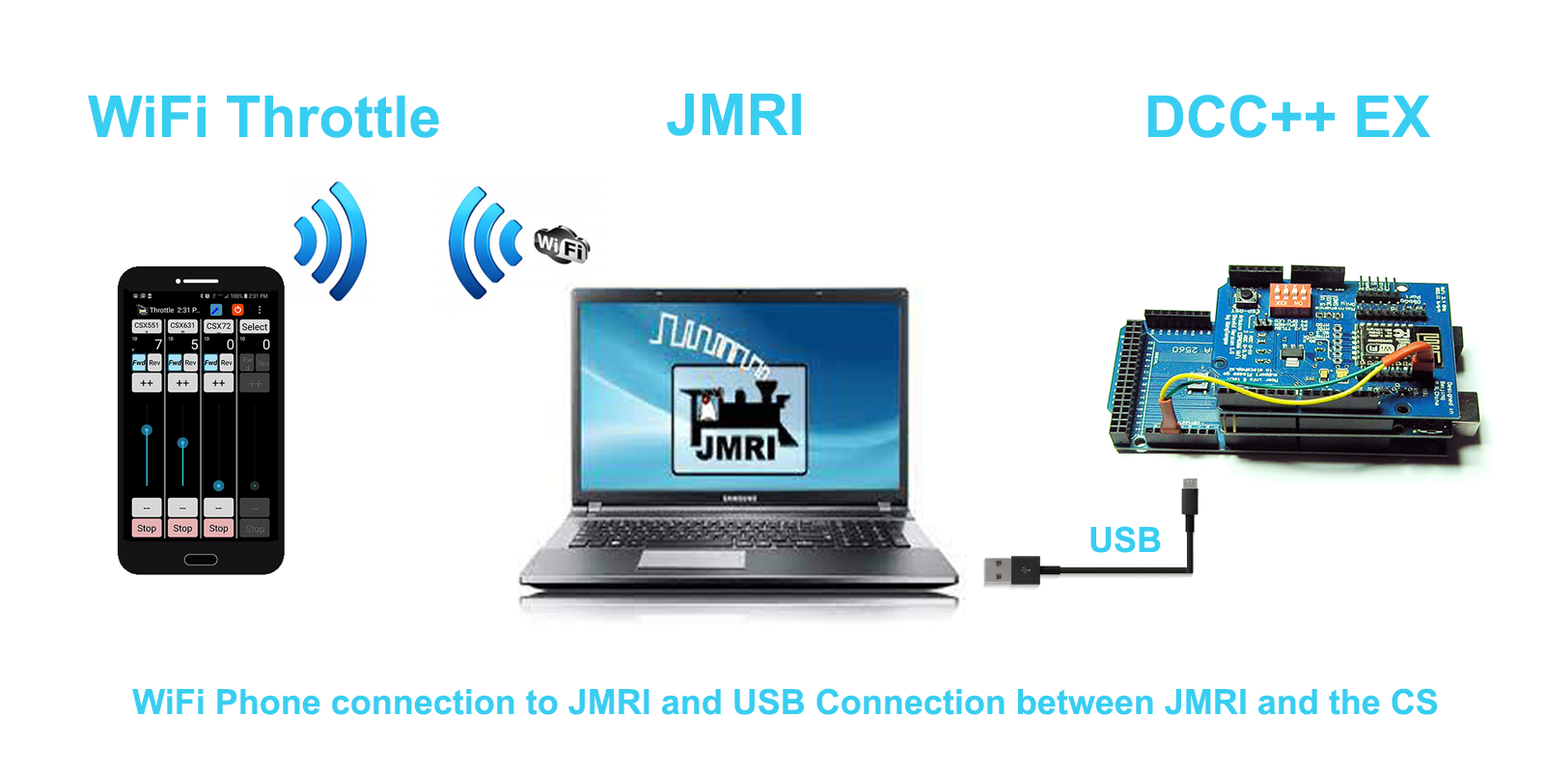
<style>
.page{position:relative;width:1544px;height:772px;background:#ffffff}
.page>*{position:absolute;margin:0}
.t1{font:57.9px "Arial-BoldMT";color:#38cef1}
.t2{font:34.7px "Arial-BoldMT";color:#38cef1}
</style>
<div class="page">
<p class="t1" style="left:88px;top:96px;width:351px;height:42px">WiFi Throttle</p>
<p class="t1" style="left:667px;top:94px;width:134px;height:42px">JMRI</p>
<p class="t1" style="left:1148px;top:95px;width:283px;height:43px">DCC++ EX</p>
<p class="t2" style="left:1091px;top:526px;width:70px;height:27px">USB</p>
<p class="t2" style="left:132px;top:688px;width:1306px;height:27px">WiFi Phone connection to JMRI and USB Connection between JMRI and the CS</p>
</div>
